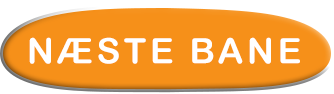
<style>
.page{position:relative;width:334px;height:94px;background:#f69019}
.page>*{position:absolute;margin:0}
.t1{font:35px "ArialRoundedMTBold";letter-spacing:0.1em;color:#ffffff}
</style>
<div class="page">
<p class="t1" style="left:29px;top:37px;width:271px;height:27px">NÆSTE BANE</p>
</div>
